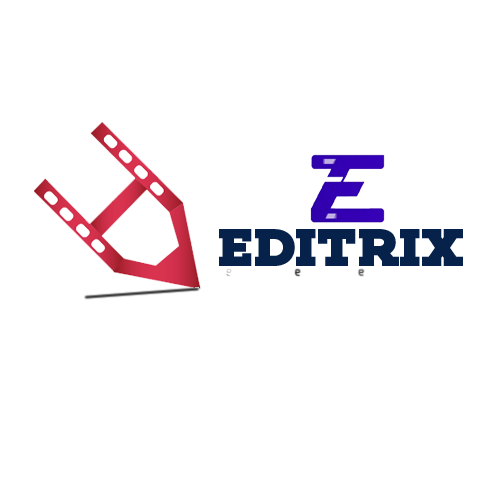
<style>
.page{position:relative;width:500px;height:500px;background:#ffffff}
.page>*{position:absolute;margin:0}
.t1{font:55px "Choplin-ExtraBold";color:#07224a;text-transform:uppercase}
</style>
<div class="page">
<p class="t1" style="left:219px;top:229px;width:244px;height:37px">editrix</p>
</div>
